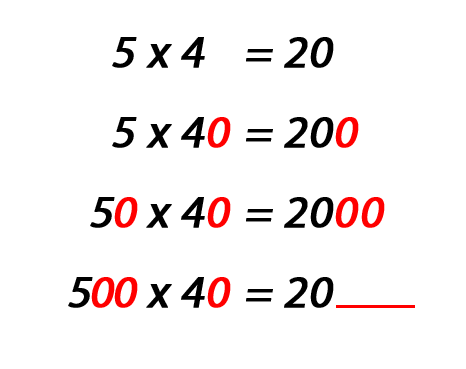
<style>
.page{position:relative;width:466px;height:369px;background:#ffffff}
.page>*{position:absolute;margin:0}
.t1{font:45.5px "MyriadPro-Regular";color:#000000;font-weight:bold;font-style:italic}
.t2{font:45.5px "MyriadPro-Regular";color:#ff0000;font-weight:bold;font-style:italic}
</style>
<div class="page">
<p class="t1" style="left:112px;top:37px;width:93px;height:31px">5 x 4</p>
<p class="t1" style="left:246px;top:37px;width:88px;height:31px">= 20</p>
<p class="t1" style="left:112px;top:117px;width:93px;height:31px">5 x 4</p>
<p class="t2" style="left:207px;top:117px;width:24px;height:31px">0</p>
<p class="t1" style="left:246px;top:117px;width:88px;height:31px">= 20</p>
<p class="t2" style="left:335px;top:117px;width:24px;height:31px">0</p>
<p class="t1" style="left:90px;top:197px;width:115px;height:31px">5   x 4</p>
<p class="t2" style="left:114px;top:197px;width:24px;height:31px">0</p>
<p class="t2" style="left:207px;top:197px;width:24px;height:31px">0</p>
<p class="t1" style="left:246px;top:197px;width:88px;height:31px">= 20</p>
<p class="t2" style="left:335px;top:197px;width:24px;height:31px">0</p>
<p class="t2" style="left:361px;top:197px;width:24px;height:31px">0</p>
<p class="t1" style="left:68px;top:277px;width:137px;height:31px">5     x 4</p>
<p class="t2" style="left:91px;top:277px;width:24px;height:31px">0</p>
<p class="t2" style="left:114px;top:277px;width:24px;height:31px">0</p>
<p class="t2" style="left:207px;top:277px;width:24px;height:31px">0</p>
<p class="t1" style="left:246px;top:277px;width:88px;height:31px">= 20</p>
</div>
